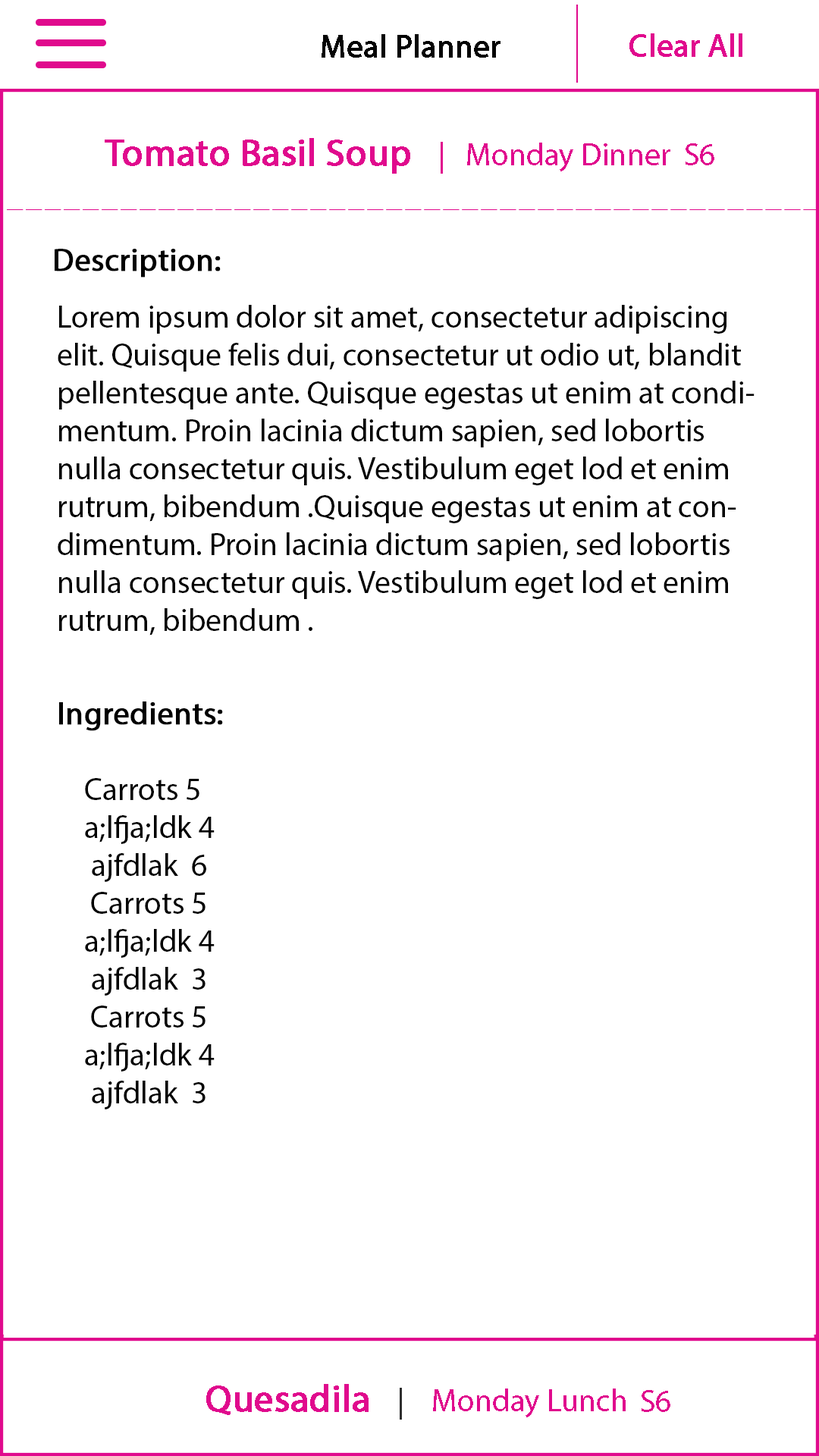
<style>
.page{position:relative;width:819px;height:1456px;background:#ffffff}
.page>*{position:absolute;margin:0}
.t1{font:31.6px "MyriadPro-Regular";color:#040404;font-weight:bold}
.t2{font:31.6px "MyriadPro-Regular";color:#e00a8d;font-weight:bold}
.t3{font:31.6px "MyriadPro-Regular";color:#e00a8d}
.t4{font:37.9px "MyriadPro-Regular";color:#e00a8d;font-weight:bold}
.t5{font:31.6px "MyriadPro-Regular";color:#000000;font-weight:bold}
.t6{font:31.6px "MyriadPro-Regular";color:#000000}
.t7{font:31.6px "MyriadPro-Regular";color:#2f2f2f}
</style>
<div class="page">
<p class="t1" style="left:322px;top:34px;width:178px;height:24px">Meal Planner</p>
<p class="t2" style="left:629px;top:33px;width:113px;height:24px">Clear All</p>
<p class="t3" style="left:105px;top:138px;width:609px;height:36px"><span class="t4">Tomato Basil Soup    </span>|   Monday Dinner  S6</p>
<p class="t5" style="left:55px;top:249px;width:166px;height:29px">Description:</p>
<p class="t6" style="left:58px;top:305px;width:697px;height:330px">Lorem ipsum dolor sit amet, consectetur adipiscing elit. Quisque felis dui, consectetur ut odio ut, blandit pellentesque ante. Quisque egestas ut enim at condimentum. Proin lacinia dictum sapien, sed lobortis nulla consectetur quis. Vestibulum eget lod et enim rutrum, bibendum .Quisque egestas ut enim at condimentum. Proin lacinia dictum sapien, sed lobortis nulla consectetur quis. Vestibulum eget lod et enim rutrum, bibendum .</p>
<p class="t6" style="left:59px;top:701px;width:164px;height:408px"><span class="t5">Ingredients:<br></span><br> Carrots 5<br> a;lfja;ldk 4<br>  ajfdlak  6<br>     Carrots 5<br> a;lfja;ldk 4<br>  ajfdlak  3<br>     Carrots 5<br> a;lfja;ldk 4<br>  ajfdlak  3</p>
<p class="t3" style="left:206px;top:1384px;width:420px;height:36px"><span class="t4">Quesadila</span><span class="t7">    | </span>   Monday Lunch</p>
<p class="t3" style="left:642px;top:1390px;width:28px;height:22px">S6</p>
</div>
